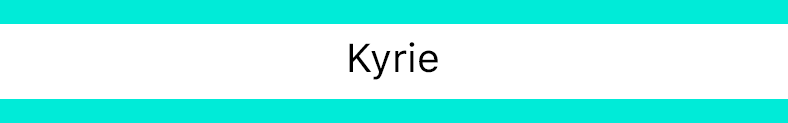
<style>
.page{position:relative;width:788px;height:123px;background:#ffffff}
.page>*{position:absolute;margin:0}
.t1{font:40px "SFProText-Regular";color:#000000}
</style>
<div class="page">
<p class="t1" style="left:349px;top:42px;width:89px;height:38px">Kyrie</p>
</div>
